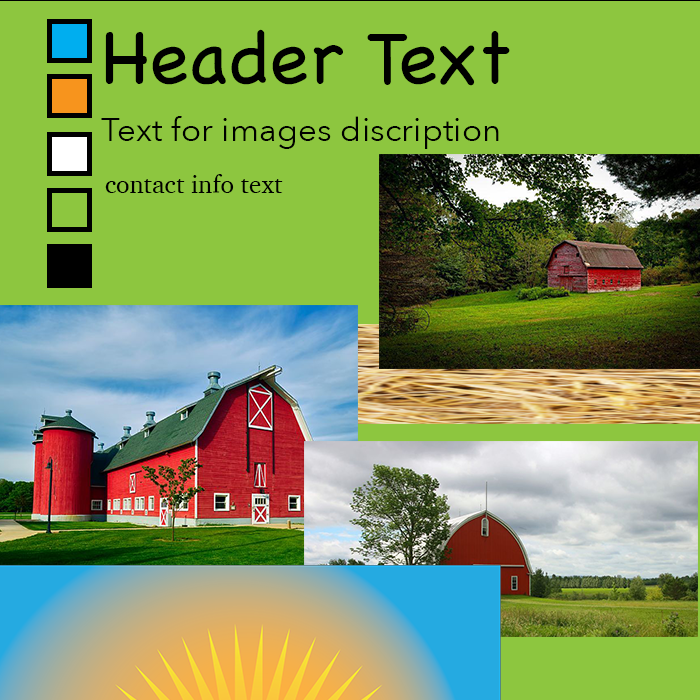
<style>
.page{position:relative;width:700px;height:700px;background:#8dc63f}
.page>*{position:absolute;margin:0}
.t1{font:75px "Chalkboard";color:#000000}
.t2{font:33.3px "AvenirNext-Regular";color:#000000}
.t3{font:25px "Charter-Roman";color:#000000}
</style>
<div class="page">
<p class="t1" style="left:105px;top:29px;width:405px;height:57px">Header Text</p>
<p class="t2" style="left:101px;top:116px;width:398px;height:33px">Text for images discription</p>
<p class="t3" style="left:105px;top:174px;width:178px;height:19px">contact info text</p>
</div>
